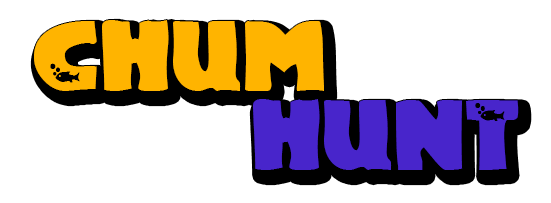
<style>
.page{position:relative;width:551px;height:203px;background:#ffffff}
.page>*{position:absolute;margin:0}
.t1{font:88.5px "TouchOfNature";color:#ffb400}
.t2{font:88.5px "TouchOfNature";color:#4825cb}
</style>
<div class="page">
<p class="t1" style="left:34px;top:20px;width:290px;height:71px">Chum</p>
<p class="t2" style="left:253px;top:99px;width:266px;height:71px">hunT</p>
</div>
